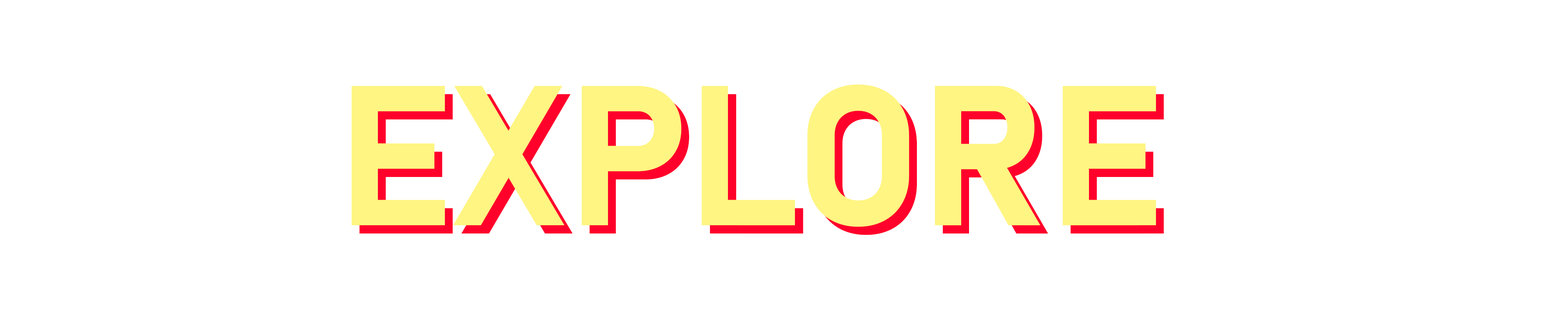
<style>
.page{position:relative;width:1568px;height:310px;background:#ffffff}
.page>*{position:absolute;margin:0}
.t1{font:196px "Bahnschrift-Bold";color:#fff582}
</style>
<div class="page">
<p class="t1" style="left:352px;top:84px;width:804px;height:143px">EXPLORE</p>
<p class="t1" style="left:359px;top:93px;width:805px;height:142px">EXPLORE</p>
</div>
